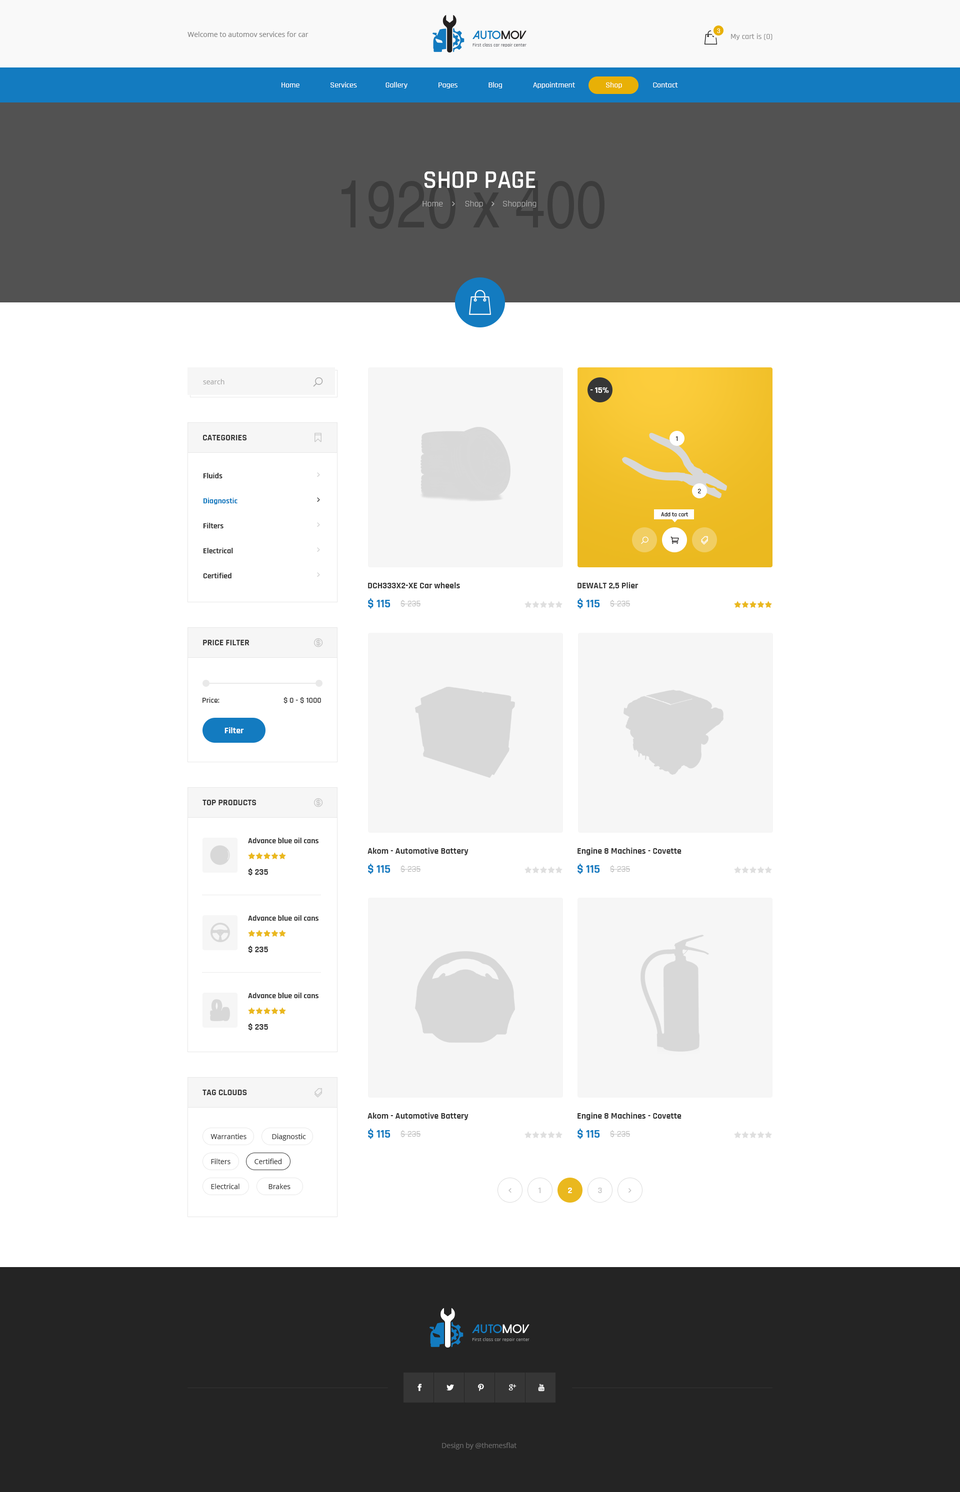
<style>
.page{position:relative;width:960px;height:1492px;background:#ffffff}
.page>*{position:absolute;margin:0}
.t1{font:6px "Poppins-Regular";color:#ffffff}
.t2{font:7px "OpenSans";color:#838383}
.t3{font:8px "Rajdhani-Medium";color:#8f8f8f}
.t4{font:8px "Rajdhani-Medium";color:#ffffff}
.t5{font:25px "Rajdhani-SemiBold";color:#ffffff;text-transform:uppercase}
.t6{font:9px "Rajdhani-Regular";color:#b5b5b5}
.t7{font:7px "OpenSans";color:#a7a7a7}
.t8{font:9px "Rajdhani-Bold";color:#ffffff;text-transform:uppercase}
.t9{font:9px "Rajdhani-Bold";color:#363636;text-transform:uppercase}
.t10{font:7px "Rajdhani-SemiBold";color:#221f1f}
.t11{font:8px/25px "Rajdhani-Bold";color:#343434}
.t12{font:8px/25px "Rajdhani-Bold";color:#137bc0}
.t13{font:6px "Rajdhani-SemiBold";color:#221f1f}
.t14{font:9px "Rajdhani-Bold";color:#363636}
.t15{font:12px "Rajdhani-Bold";color:#137bc0}
.t16{font:9px "Rajdhani-Regular";color:#b2b2b2}
.t17{font:8px "Rajdhani-SemiBold";color:#363636}
.t18{font:9px "Rajdhani-Bold";color:#ffffff}
.t19{font:8px "Rajdhani-Bold";color:#343434}
.t20{font:7px "OpenSans";color:#343434}
.t21{font:9px "Rajdhani-Bold";color:#d0d0d0;text-transform:uppercase}
.t22{font:7px "OpenSans";color:#6a6a6a}
</style>
<div class="page">
<p class="t1" style="left:717px;top:28px;width:3px;height:5px">3</p>
<p class="t2" style="left:188px;top:32px;width:120px;height:5px">Welcome to automov services for car</p>
<p class="t3" style="left:731px;top:34px;width:41px;height:6px">My cart is (0)</p>
<p class="t4" style="left:282px;top:82px;width:396px;height:6px">Home               Services              Gallery               Pages               Blog               Appointment               Shop               Contact</p>
<p class="t5" style="left:424px;top:172px;width:112px;height:16px">Shop page</p>
<p class="t6" style="left:422px;top:200px;width:114px;height:8px">Home         Shop        Shopping</p>
<p class="t7" style="left:203px;top:379px;width:21px;height:5px">search</p>
<p class="t8" style="left:590px;top:388px;width:19px;height:5px">- 15%</p>
<p class="t9" style="left:203px;top:435px;width:44px;height:5px">Categories</p>
<p class="t10" style="left:676px;top:436px;width:2px;height:5px">1</p>
<p class="t11" style="left:203px;top:473px;width:35px;height:105px">Fluids<br><span class="t12">Diagnostic<br></span>Filters<br>Electrical<br>Certified</p>
<p class="t10" style="left:698px;top:489px;width:3px;height:5px">2</p>
<p class="t13" style="left:661px;top:512px;width:27px;height:4px">Add to cart</p>
<p class="t14" style="left:368px;top:582px;width:92px;height:6px">DCH333X2-XE Car wheels</p>
<p class="t14" style="left:578px;top:582px;width:60px;height:8px">DEWALT 2,5 Plier</p>
<p class="t15" style="left:368px;top:598px;width:22px;height:11px">$ 115</p>
<p class="t16" style="left:400px;top:600px;width:21px;height:8px">$ 235</p>
<p class="t15" style="left:578px;top:598px;width:22px;height:11px">$ 115</p>
<p class="t16" style="left:610px;top:600px;width:20px;height:8px">$ 235</p>
<p class="t9" style="left:203px;top:640px;width:47px;height:6px">price filter</p>
<p class="t17" style="left:202px;top:697px;width:119px;height:7px">Price:         $ 0 - $ 1000</p>
<p class="t18" style="left:224px;top:728px;width:20px;height:6px">Filter</p>
<p class="t9" style="left:202px;top:800px;width:54px;height:6px">top products</p>
<p class="t19" style="left:248px;top:838px;width:70px;height:6px">Advance blue oil cans</p>
<p class="t14" style="left:368px;top:848px;width:100px;height:8px">Akom - Automotive Battery</p>
<p class="t14" style="left:578px;top:848px;width:104px;height:8px">Engine 8 Machines - Covette</p>
<p class="t14" style="left:248px;top:868px;width:20px;height:8px">$ 235</p>
<p class="t15" style="left:368px;top:864px;width:22px;height:10px">$ 115</p>
<p class="t16" style="left:400px;top:866px;width:21px;height:7px">$ 235</p>
<p class="t15" style="left:578px;top:864px;width:22px;height:10px">$ 115</p>
<p class="t16" style="left:610px;top:866px;width:20px;height:7px">$ 235</p>
<p class="t19" style="left:248px;top:916px;width:70px;height:5px">Advance blue oil cans</p>
<p class="t14" style="left:248px;top:946px;width:20px;height:8px">$ 235</p>
<p class="t19" style="left:248px;top:993px;width:70px;height:5px">Advance blue oil cans</p>
<p class="t14" style="left:248px;top:1024px;width:20px;height:7px">$ 235</p>
<p class="t9" style="left:202px;top:1090px;width:45px;height:6px">Tag clouds</p>
<p class="t14" style="left:368px;top:1113px;width:100px;height:7px">Akom - Automotive Battery</p>
<p class="t14" style="left:578px;top:1113px;width:104px;height:7px">Engine 8 Machines - Covette</p>
<p class="t20" style="left:210px;top:1134px;width:36px;height:6px">Warranties</p>
<p class="t20" style="left:272px;top:1134px;width:34px;height:7px">Diagnostic</p>
<p class="t15" style="left:368px;top:1129px;width:22px;height:11px">$ 115</p>
<p class="t16" style="left:400px;top:1130px;width:21px;height:8px">$ 235</p>
<p class="t15" style="left:578px;top:1129px;width:22px;height:11px">$ 115</p>
<p class="t16" style="left:610px;top:1130px;width:20px;height:8px">$ 235</p>
<p class="t20" style="left:211px;top:1159px;width:19px;height:5px">Filters</p>
<p class="t20" style="left:254px;top:1159px;width:28px;height:5px">Certified</p>
<p class="t20" style="left:211px;top:1184px;width:29px;height:6px">Electrical</p>
<p class="t20" style="left:268px;top:1184px;width:22px;height:6px">Brakes</p>
<p class="t21" style="left:538px;top:1188px;width:3px;height:6px">1</p>
<p class="t8" style="left:568px;top:1188px;width:4px;height:6px">2</p>
<p class="t21" style="left:598px;top:1188px;width:4px;height:6px">3</p>
<p class="t22" style="left:442px;top:1443px;width:74px;height:7px">Design by @themesflat</p>
</div>
